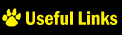
<style>
.page{position:relative;width:122px;height:35px;background:#000000}
.page>*{position:absolute;margin:0}
.t1{font:20px "FranklinGotT-DemCon";color:#fff100}
</style>
<div class="page">
<p class="t1" style="left:26px;top:11px;width:92px;height:14px">Useful Links</p>
</div>
